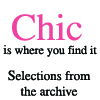
<style>
.page{position:relative;width:100px;height:100px;background:#ffffff}
.page>*{position:absolute;margin:0}
.t1{font:38px "Times-Roman";color:#f040a1}
.t2{font:12px "Times-Roman";color:#060808}
.t3{font:13px "Times-Roman";color:#060808}
.t4{font:14px "Times-Roman";color:#060808}
</style>
<div class="page">
<p class="t1" style="left:12px;top:14px;width:70px;height:27px">Chic</p>
<p class="t2" style="left:3px;top:45px;width:94px;height:12px"><span class="t3">i</span>s where you find it</p>
<p class="t3" style="left:8px;top:70px;width:83px;height:26px;text-align:center"><span class="t4">S</span>elections from<br>the archive</p>
</div>
